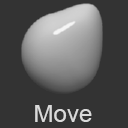
<style>
.page{position:relative;width:128px;height:128px;background:#333333}
.page>*{position:absolute;margin:0}
.t1{font:24px "ArialMT";color:#dadada}
</style>
<div class="page">
<p class="t1" style="left:35px;top:105px;width:57px;height:17px">Move</p>
</div>
